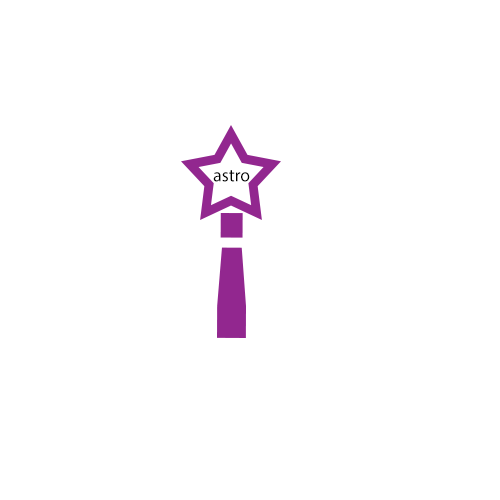
<style>
.page{position:relative;width:500px;height:500px;background:#ffffff}
.page>*{position:absolute;margin:0}
.t1{font:18.1px "MyriadHebrew-Regular";color:#000000}
</style>
<div class="page">
<p class="t1" style="left:213px;top:170px;width:37px;height:12px">astro</p>
</div>
